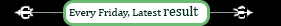
<style>
.page{position:relative;width:281px;height:26px;background:#000000}
.page>*{position:absolute;margin:0}
.t1{font:11px "Cambria";color:#013220}
.t2{font:14px "Cambria";color:#013220}
</style>
<div class="page">
<p class="t1" style="left:69px;top:6px;width:130px;height:12px">Every Friday, Latest <span class="t2">result</span></p>
</div>
